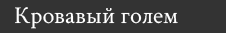
<style>
.page{position:relative;width:226px;height:33px;background:#333333}
.page>*{position:absolute;margin:0}
.t1{font:24px "CrimsonText-Regular";color:#ffffff}
</style>
<div class="page">
<p class="t1" style="left:15px;top:7px;width:163px;height:22px">Кровавый голем</p>
</div>
